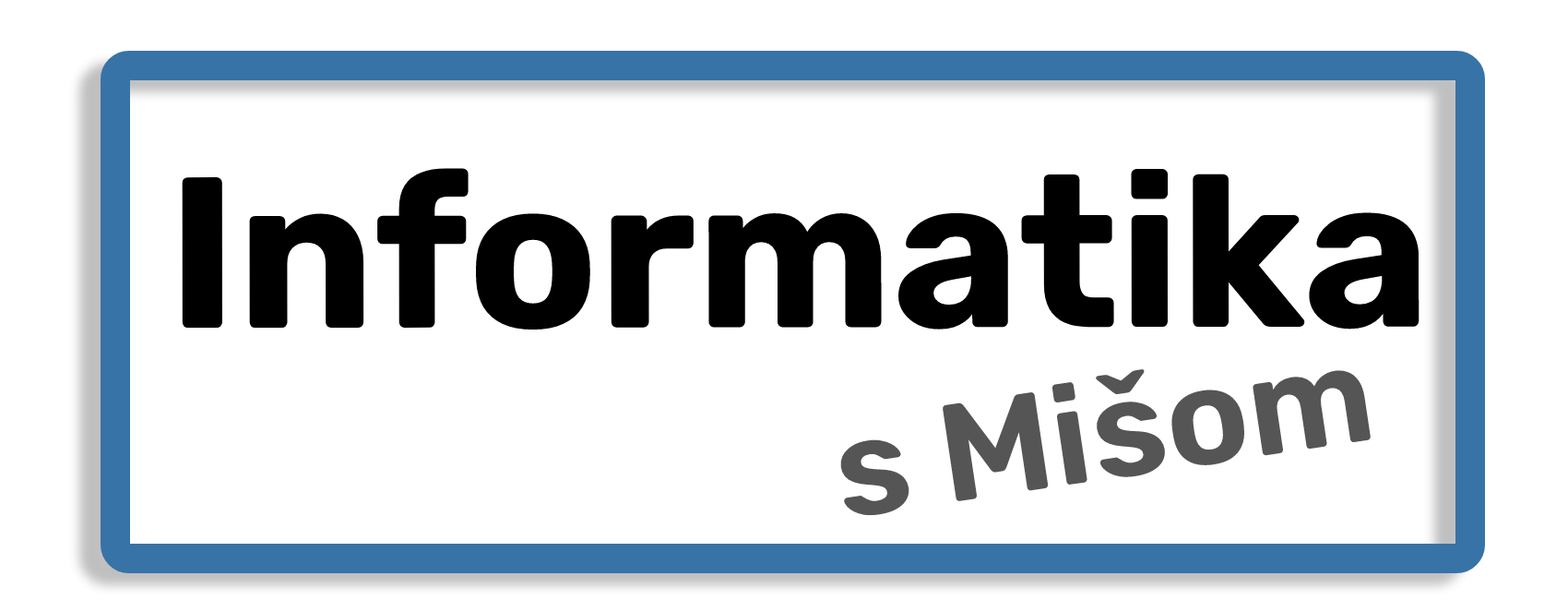
<style>
.page{position:relative;width:1568px;height:600px;background:#ffffff}
.page>*{position:absolute;margin:0}
.t1{font:214.7px "Rubik-Bold";color:#000000}
.t2{font:138.4px "Rubik-SemiBold";color:#555555}
</style>
<div class="page">
<p class="t1" style="left:182px;top:168px;width:1238px;height:162px">Informatika</p>
<p class="t2" style="left:839px;top:368px;width:533px;height:148px;rotate:-8deg">s Mišom</p>
</div>
